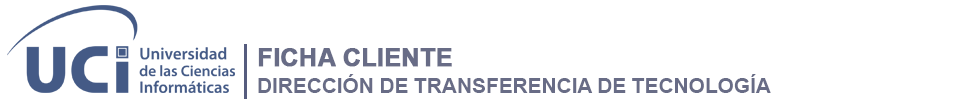
<style>
.page{position:relative;width:957px;height:100px;background:#ffffff}
.page>*{position:absolute;margin:0}
.t1{font:25.3px "Arial-BoldMT";letter-spacing:-0.015em;color:#686c86;font-weight:bold}
.t2{font:21.3px "Arial-BoldMT";letter-spacing:-0.015em;color:#686c86}
</style>
<div class="page">
<p class="t1" style="left:258px;top:48px;width:194px;height:19px">FICHA CLIENTE</p>
<p class="t2" style="left:258px;top:74px;width:513px;height:19px">DIRECCIÓN DE TRANSFERENCIA DE TECNOLOGÍA</p>
</div>
